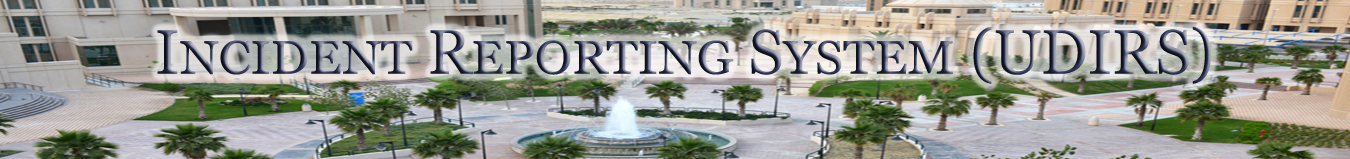
<style>
.page{position:relative;width:1350px;height:159px}
.page>*{position:absolute;margin:0}
.t1{font:62.5px "Georgia";font-variant:small-caps}
</style>
<div class="page">
<p class="t1" style="left:157px;top:26px;width:1054px;height:58px">Incident Reporting System (UDIRS)</p>
</div>
